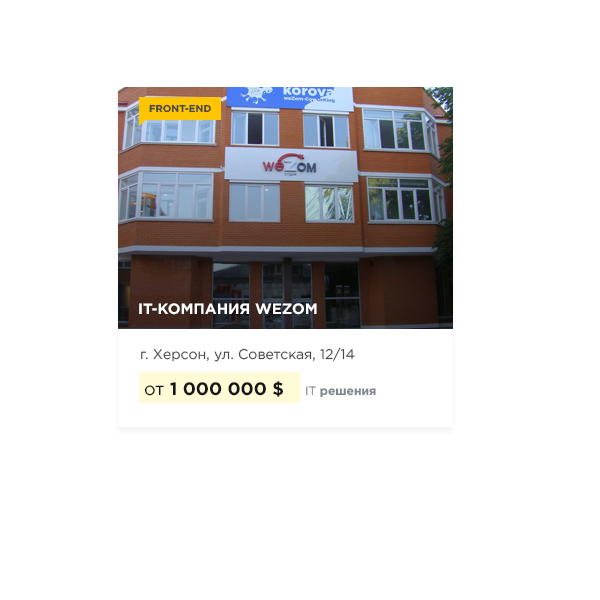
<style>
.page{position:relative;width:600px;height:600px;background:#ffffff}
.page>*{position:absolute;margin:0}
.t1{font:15px "GothamPro-Bold";color:#ffffff;text-transform:uppercase}
.t2{font:14px "GothamPro";color:#48494a}
.t3{font:18px "GothamPro-Bold";color:#161617}
.t4{font:18px "GothamPro";color:#161617}
.t5{font:12px "GothamPro-Bold";color:#80848d}
.t6{font:12px "GothamPro";color:#80848d}
</style>
<div class="page">
<p class="t1" style="left:139px;top:303px;width:178px;height:12px">IT-КОМПАНИЯ WEZOM</p>
<p class="t2" style="left:141px;top:347px;width:214px;height:15px">г. Херсон, ул. Советская, 12/14</p>
<p class="t3" style="left:144px;top:381px;width:139px;height:16px"><span class="t4">от </span>1 000 000 $</p>
<p class="t5" style="left:306px;top:386px;width:70px;height:12px"><span class="t6">IT </span>решения</p>
</div>
